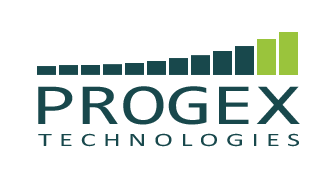
<style>
.page{position:relative;width:334px;height:178px;background:#ffffff}
.page>*{position:absolute;margin:0}
.t1{font:58.2px "Consolas";color:#18484c;scale:1.4 1}
.t2{font:19.1px "Calibri";letter-spacing:0.26em;color:#18484c;scale:1.5 1}
</style>
<div class="page">
<p class="t1" style="left:38px;top:86px;width:262px;height:39px">PROGEX</p>
<p class="t2" style="left:38px;top:133px;width:261px;height:14px">TECHNOLOGIES</p>
</div>
